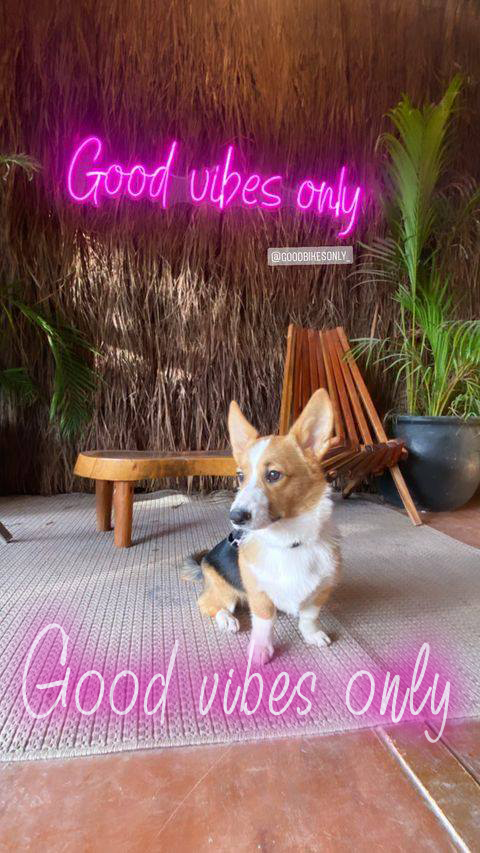
<style>
.page{position:relative;width:480px;height:853px}
.page>*{position:absolute;margin:0}
.t1{font:81.1px "BillySignature";letter-spacing:0.08em;color:#fbe4fe;scale:0.71 1}
</style>
<div class="page">
<p class="t1" style="left:22px;top:623px;width:428px;height:120px;opacity:0.7">Good vibes only</p>
</div>
